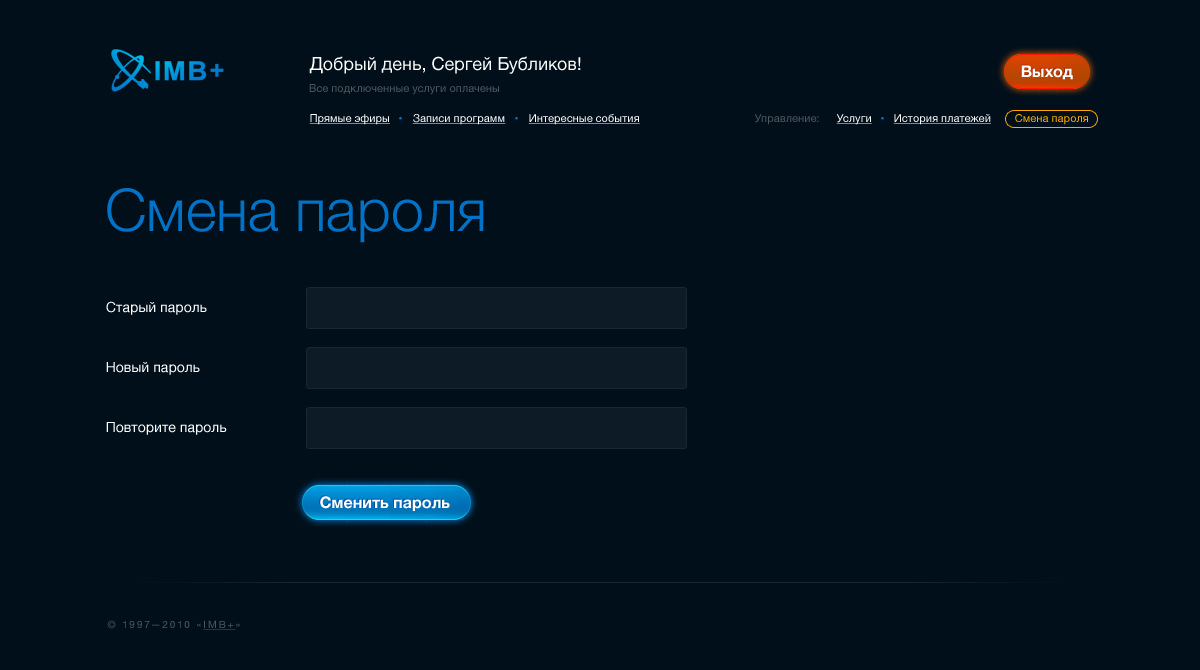
<style>
.page{position:relative;width:1200px;height:670px;background:#000f1a}
.page>*{position:absolute;margin:0}
.t1{font:18px "HelveticaNeue";color:#ffffff}
.t2{font:16px "HelveticaNeue-Bold";color:#ffffff}
.t3{font:11px "HelveticaNeue";color:#4d575f}
.t4{font:11px "HelveticaNeue";color:#ffffff;text-decoration:underline}
.t5{font:11px "HelveticaNeue";color:#ffa800}
.t6{font:59px "HelveticaNeue-Light";color:#0073c9}
.t7{font:14px "HelveticaNeue";color:#ffffff}
.t8{font:10px "HelveticaNeue";letter-spacing:0.2em;color:#4d575f;text-transform:uppercase}
.t9{font:10px "HelveticaNeue";letter-spacing:0.2em;color:#4d575f;text-transform:uppercase;text-decoration:underline}
</style>
<div class="page">
<p class="t1" style="left:309px;top:56px;width:272px;height:18px">Добрый день, Сергей Бубликов!</p>
<p class="t2" style="left:1021px;top:65px;width:52px;height:15px">Выход</p>
<p class="t3" style="left:309px;top:84px;width:190px;height:11px">Все подключенные услуги оплачены</p>
<p class="t4" style="left:309px;top:114px;width:81px;height:11px">Прямые эфиры</p>
<p class="t4" style="left:412px;top:114px;width:94px;height:11px">Записи программ</p>
<p class="t4" style="left:528px;top:114px;width:112px;height:11px">Интересные события</p>
<p class="t3" style="left:754px;top:114px;width:65px;height:11px">Управление:</p>
<p class="t4" style="left:836px;top:114px;width:36px;height:11px">Услуги</p>
<p class="t4" style="left:893px;top:114px;width:98px;height:11px">История платежей</p>
<p class="t5" style="left:1015px;top:114px;width:73px;height:11px">Смена пароля</p>
<p class="t6" style="left:107px;top:188px;width:377px;height:55px">Смена пароля</p>
<p class="t7" style="left:106px;top:301px;width:101px;height:14px">Старый пароль</p>
<p class="t7" style="left:106px;top:362px;width:94px;height:13px">Новый пароль</p>
<p class="t7" style="left:106px;top:422px;width:121px;height:13px">Повторите пароль</p>
<p class="t2" style="left:320px;top:496px;width:130px;height:15px">Сменить пароль</p>
<p class="t8" style="left:107px;top:620px;width:133px;height:10px">© 1997—2010 «<span class="t9">IMB+</span>»</p>
</div>
